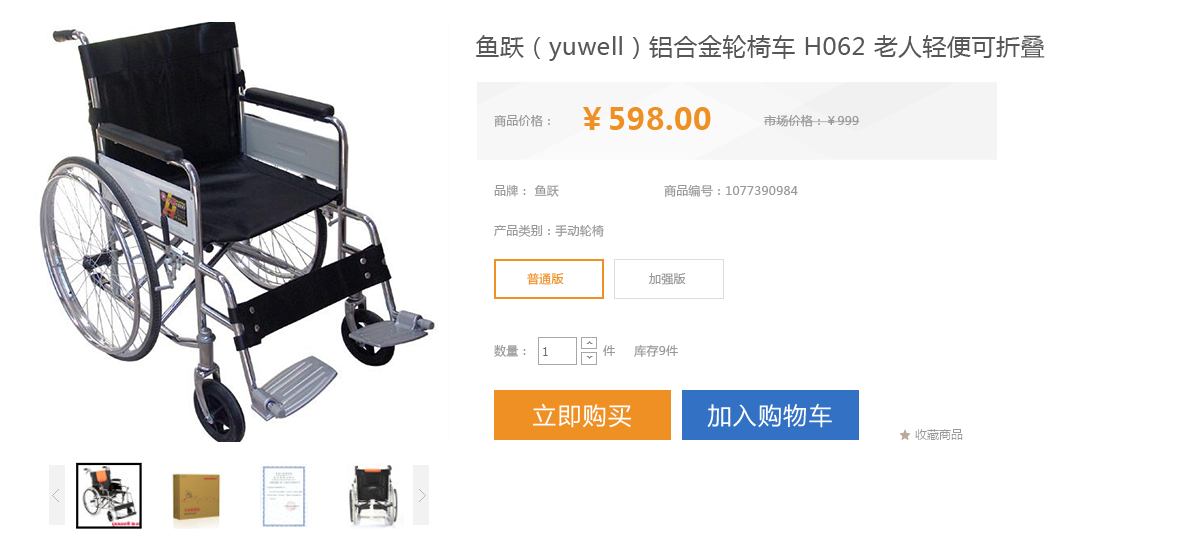
<style>
.page{position:relative;width:1199px;height:544px;background:#ffffff}
.page>*{position:absolute;margin:0}
.t1{font:24px "MicrosoftYaHei";letter-spacing:0.02em;color:#575757}
.t2{font:30px "MicrosoftYaHei-Bold";letter-spacing:0.02em;color:#ee9024}
.t3{font:12px "MicrosoftYaHei";letter-spacing:0.02em;color:#999999}
.t4{font:12px "MicrosoftYaHei";letter-spacing:0.02em;color:#ee9024}
.t5{font:24px "MicrosoftYaHei";letter-spacing:0.05em;color:#ffffff}
.t6{font:18px "SimSun";letter-spacing:0.04em;color:#b8b8b8}
</style>
<div class="page">
<p class="t1" style="left:476px;top:35px;width:569px;height:26px">鱼跃（yuwell）铝合金轮椅车 H062 老人轻便可折叠</p>
<p class="t2" style="left:583px;top:107px;width:128px;height:23px">￥598.00</p>
<p class="t3" style="left:494px;top:114px;width:56px;height:13px">商品价格：</p>
<p class="t3" style="left:764px;top:114px;width:96px;height:13px">市场价格：￥999</p>
<p class="t3" style="left:494px;top:184px;width:65px;height:13px">品牌： 鱼跃</p>
<p class="t3" style="left:664px;top:184px;width:134px;height:13px">商品编号：1077390984</p>
<p class="t3" style="left:494px;top:224px;width:110px;height:13px">产品类别：手动轮椅</p>
<p class="t4" style="left:527px;top:273px;width:37px;height:12px">普通版</p>
<p class="t3" style="left:648px;top:273px;width:38px;height:12px">加强版</p>
<p class="t3" style="left:494px;top:344px;width:32px;height:13px">数量：</p>
<p class="t3" style="left:603px;top:344px;width:75px;height:13px">件     库存9件</p>
<p class="t5" style="left:533px;top:403px;width:98px;height:25px">立即购买</p>
<p class="t5" style="left:707px;top:403px;width:125px;height:25px">加入购物车</p>
<p class="t6" style="left:52px;top:489px;width:7px;height:13px;rotate:180deg">&gt;</p>
<p class="t6" style="left:419px;top:489px;width:7px;height:13px">&gt;</p>
</div>
